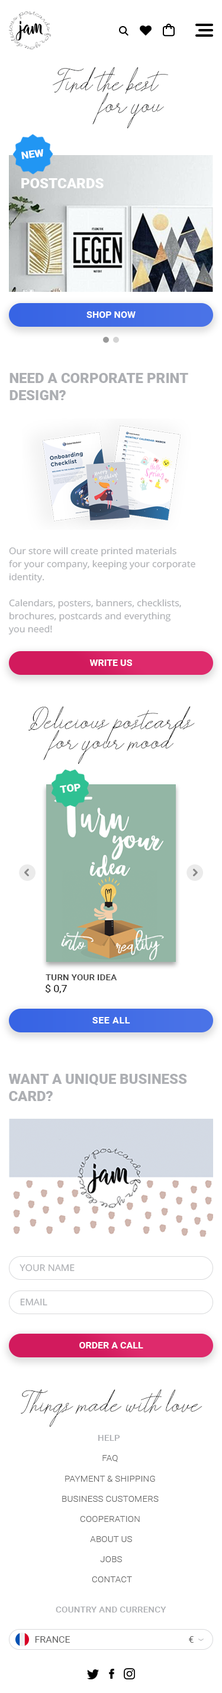
<style>
.page{position:relative;width:222px;height:1693px;background:#ffffff}
.page>*{position:absolute;margin:0}
.t1{font:20.7px "nether";color:#090b0c}
.t2{font:10.1px "Roboto-Black";color:#ffffff;text-transform:uppercase;scale:1.05 1}
.t3{font:13.5px "Roboto-Black";color:#ffffff;text-transform:uppercase;scale:1.05 1}
.t4{font:9px "Roboto-Bold";color:#ffffff;text-transform:uppercase;scale:1.05 1}
.t5{font:13.5px "Roboto-Black";color:#adafb3;text-transform:uppercase;scale:1.05 1}
.t6{font:9px/13px "OpenSans-Regular";color:#adafb3;scale:1.05 1}
.t7{font:19.7px "nether";color:#000000;scale:1.05 1}
.t8{font:8.3px "Roboto-Medium";color:#3a3a3a;text-transform:uppercase;scale:1.1 1}
.t9{font:9.5px "Roboto-Regular";color:#000000;text-transform:uppercase;scale:1.1 1}
.t10{font:9px "Roboto-Bold";letter-spacing:0.04em;color:#ffffff;text-transform:uppercase;scale:1.05 1}
.t11{font:9px "OpenSans-Regular";color:#adafb3;text-transform:uppercase;scale:1.05 1}
.t12{font:8.3px "Roboto-Medium";color:#adafb3;text-transform:uppercase;scale:1.1 1}
.t13{font:8.3px "Roboto-Light";color:#636363;text-transform:uppercase;scale:1.1 1}
.t14{font:9px "Roboto-Regular";color:#636363;text-transform:uppercase;scale:1.05 1}
</style>
<div class="page">
<p class="t1" style="left:53px;top:67px;width:115px;height:27px">Find the best</p>
<p class="t1" style="left:92px;top:92px;width:72px;height:36px;text-align:center">for you</p>
<p class="t2" style="left:21px;top:149px;width:22px;height:10px;rotate:-8deg">new</p>
<p class="t3" style="left:21px;top:178px;width:83px;height:10px">postcards</p>
<p class="t4" style="left:86px;top:311px;width:50px;height:7px">shop now</p>
<p class="t5" style="left:9px;top:373px;width:179px;height:27px">need a corporate print <br>design?</p>
<p class="t6" style="left:8px;top:547px;width:187px;height:88px">Our store will create printed materials <br>for your company, keeping your corporate <br>identity. <br><br>Calendars, posters, banners, checklists, <br>brochures, postcards and everything <br>you need!</p>
<p class="t4" style="left:89px;top:660px;width:43px;height:6px">write us</p>
<p class="t7" style="left:28px;top:706px;width:167px;height:38px;text-align:center">Delicious postcards</p>
<p class="t7" style="left:43px;top:727px;width:133px;height:37px;text-align:center">for your mood</p>
<p class="t2" style="left:60px;top:784px;width:21px;height:9px;rotate:-8deg">top</p>
<p class="t8" style="left:46px;top:975px;width:71px;height:6px">turn your idea</p>
<p class="t9" style="left:46px;top:984px;width:21px;height:10px">$ 0,7</p>
<p class="t10" style="left:92px;top:1017px;width:38px;height:7px">see all</p>
<p class="t5" style="left:8px;top:1074px;width:179px;height:27px">want a unique business <br>card?</p>
<p class="t11" style="left:20px;top:1264px;width:55px;height:8px">your name</p>
<p class="t11" style="left:20px;top:1298px;width:27px;height:8px">email</p>
<p class="t4" style="left:79px;top:1342px;width:64px;height:7px">order a call</p>
<p class="t7" style="left:21px;top:1390px;width:182px;height:38px;text-align:center">Things made with love</p>
<p class="t12" style="left:98px;top:1435px;width:22px;height:6px">help</p>
<p class="t13" style="left:102px;top:1455px;width:16px;height:8px">faq</p>
<p class="t13" style="left:65px;top:1476px;width:90px;height:6px">payment &amp; shipping</p>
<p class="t13" style="left:62px;top:1496px;width:97px;height:6px">business customers</p>
<p class="t13" style="left:80px;top:1516px;width:60px;height:6px">cooperation</p>
<p class="t13" style="left:90px;top:1537px;width:42px;height:5px">about us</p>
<p class="t13" style="left:100px;top:1557px;width:22px;height:6px">jobs</p>
<p class="t13" style="left:92px;top:1577px;width:40px;height:6px">contact</p>
<p class="t12" style="left:56px;top:1607px;width:110px;height:6px">country and currency</p>
<p class="t14" style="left:35px;top:1637px;width:35px;height:6px">france</p>
<p class="t14" style="left:189px;top:1637px;width:5px;height:6px">€</p>
</div>
